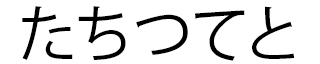
<style>
.page{position:relative;width:320px;height:64px;background:#ffffff}
.page>*{position:absolute;margin:0}
.t1{font:60px "KozGoPr6N-Regular";color:#000000}
</style>
<div class="page">
<p class="t1" style="left:22px;top:6px;width:272px;height:55px">たちつてと</p>
</div>
